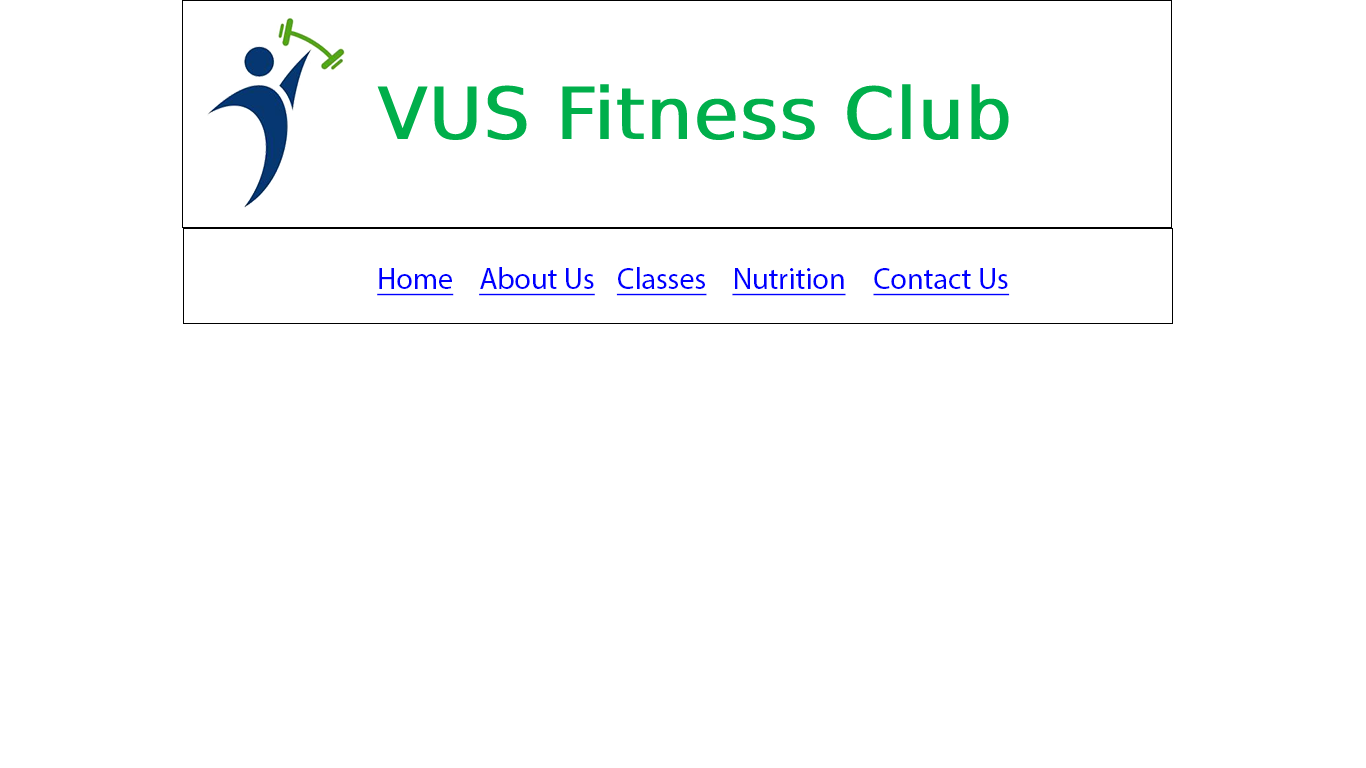
<style>
.page{position:relative;width:1366px;height:768px;background:#ffffff}
.page>*{position:absolute;margin:0}
.t1{font:30px "MyriadPro-Regular";color:#0000ff;text-decoration:underline}
</style>
<div class="page">
<p class="t1" style="left:377px;top:268px;width:77px;height:28px">Home</p>
<p class="t1" style="left:479px;top:267px;width:116px;height:29px">About Us</p>
<p class="t1" style="left:616px;top:267px;width:91px;height:29px">Classes</p>
<p class="t1" style="left:732px;top:268px;width:114px;height:28px">Nutrition</p>
<p class="t1" style="left:873px;top:268px;width:137px;height:28px">Contact Us</p>
</div>
